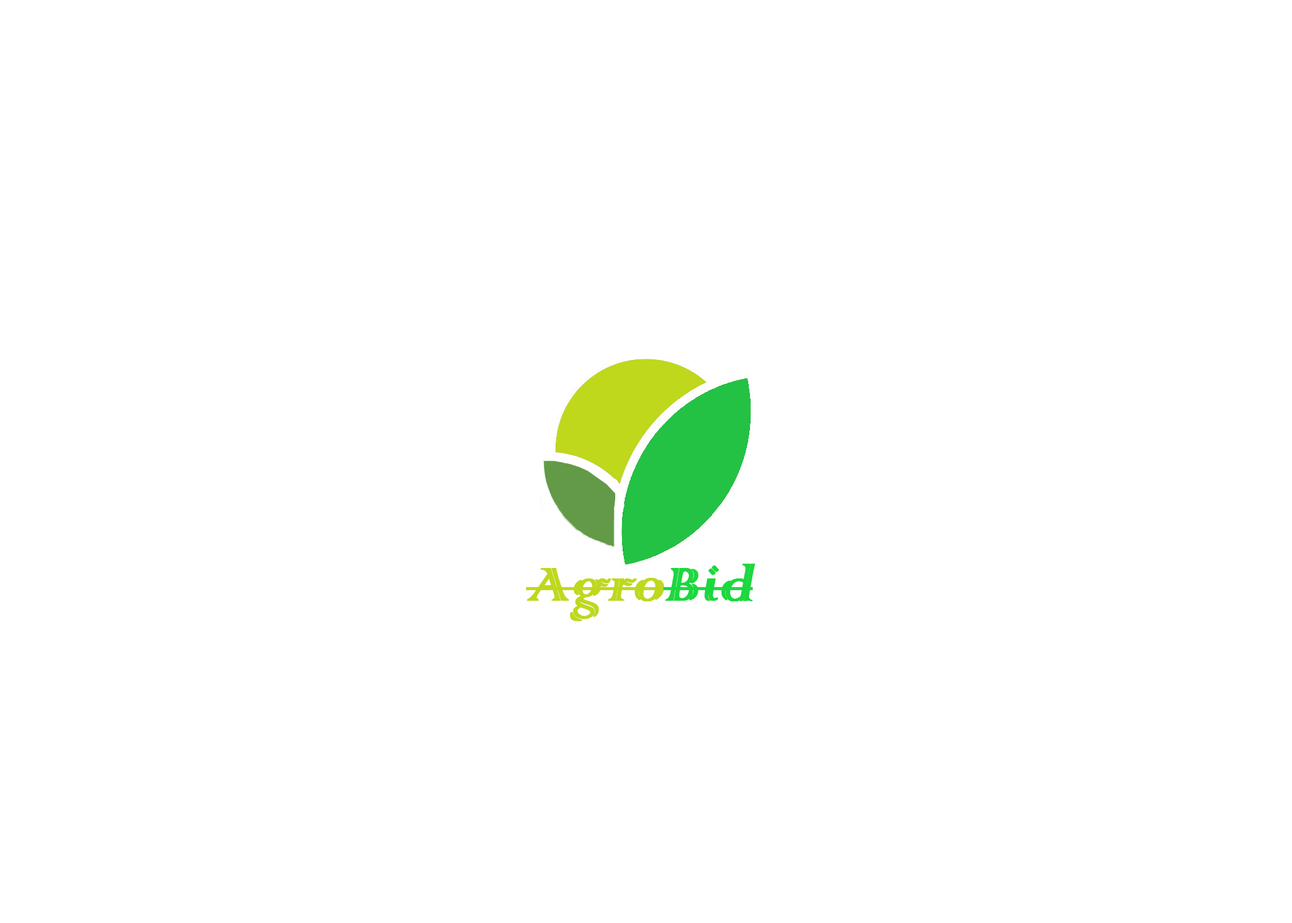
<style>
.page{position:relative;width:1292px;height:923px;background:#ffffff}
.page>*{position:absolute;margin:0}
.t1{font:61.5px "ColonnaMT";color:#bfd81c;font-weight:bold;font-style:italic}
.t2{font:61.5px "ColonnaMT";color:#1cd83f;font-weight:bold;font-style:italic}
</style>
<div class="page">
<p class="t1" style="left:526px;top:564px;width:230px;height:57px">Agro<span class="t2">Bid</span></p>
</div>
